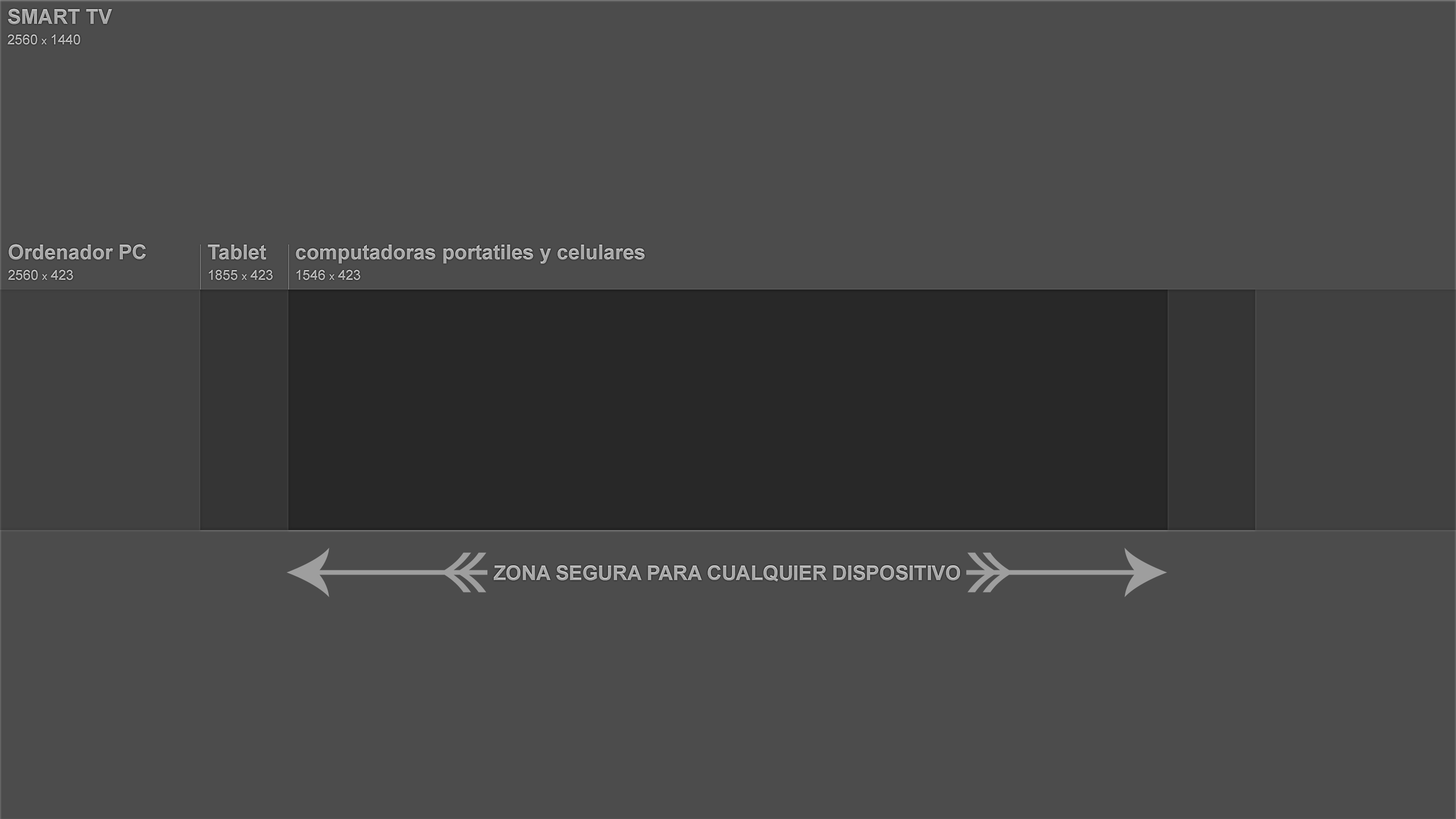
<style>
.page{position:relative;width:1456px;height:819px;background:#4c4c4c}
.page>*{position:absolute;margin:0}
.t1{font:20.5px/20.5px "Arial-BoldMT";color:#acacac}
.t2{font:13.6px/20.5px "ArialMT";color:#acacac}
.t3{font:10.2px/20.5px "ArialMT";color:#acacac}
.t4{font:20.5px/20.5px "Arial-BoldMT";color:#adadad}
.t5{font:13.6px/20.5px "ArialMT";color:#adadad}
.t6{font:10.2px/20.5px "ArialMT";color:#adadad}
.t7{font:20.5px/20.5px "Arial-BoldMT";color:#b2b2b2}
.t8{font:13.6px/20.5px "ArialMT";color:#b2b2b2}
.t9{font:10.2px/20.5px "ArialMT";color:#b2b2b2}
.t10{font:20.5px "Arial-BoldMT";color:#acacac}
.t11{font:20.1px "Arial-BoldMT";color:#a8a8a8}
</style>
<div class="page">
<p class="t1" style="left:7px;top:9px;width:105px;height:36px">SMART TV<br><span class="t2">2560 </span><span class="t3">x</span><span class="t2"> 1440</span></p>
<p class="t4" style="left:8px;top:244px;width:138px;height:36px">Ordenador PC<br><span class="t5">2560 </span><span class="t6">x</span><span class="t5"> 423</span></p>
<p class="t7" style="left:208px;top:245px;width:65px;height:35px">Tablet<br><span class="t8">1855 </span><span class="t9">x</span><span class="t8"> 423</span></p>
<p class="t10" style="left:296px;top:245px;width:349px;height:35px">computadoras portatiles y celulares<br><span class="t2">1546 </span><span class="t3">x</span><span class="t2"> 423</span></p>
<p class="t11" style="left:494px;top:565px;width:466px;height:17px">ZONA SEGURA PARA CUALQUIER DISPOSITIVO</p>
</div>
